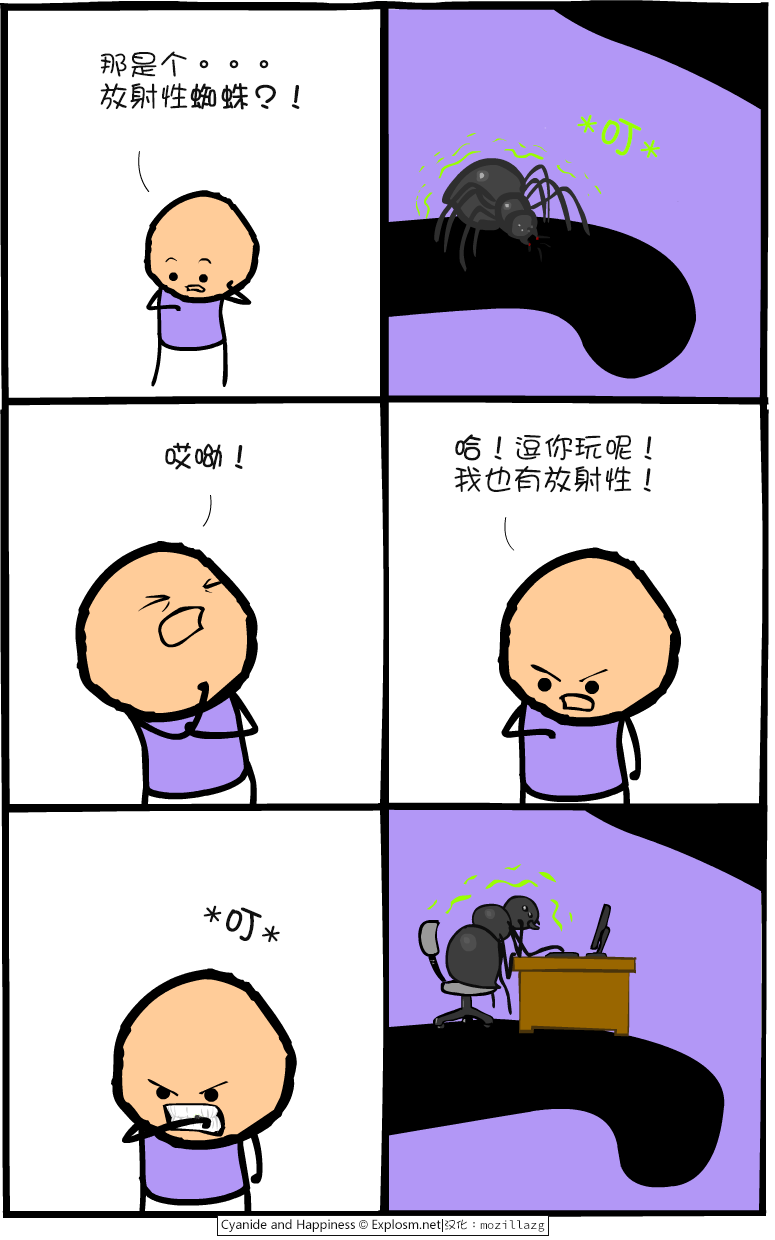
<style>
.page{position:relative;width:775px;height:1240px;background:#ffffff}
.page>*{position:absolute;margin:0}
.t1{font:30px/32px "DFGirl";color:#111111}
.t2{font:30px/32px "DFGirl";color:#111111;font-weight:bold}
.t3{font:44px "DFGirl";color:#99ff00;font-weight:bold}
.t4{font:30px "DFGirl";color:#111111;font-weight:bold}
.t5{font:40px "DFGirl";color:#111111;font-weight:bold}
</style>
<div class="page">
<p class="t1" style="left:100px;top:51px;width:200px;height:59px">那是个。。。<br>放射性<span class="t2">蜘蛛？！</span></p>
<p class="t3" style="left:577px;top:114px;width:83px;height:44px;rotate:22deg">*叮*</p>
<p class="t1" style="left:454px;top:434px;width:198px;height:59px"><span class="t2">哈</span>！逗你玩呢！<br>我也有放射性！</p>
<p class="t4" style="left:165px;top:442px;width:78px;height:28px">哎呦！</p>
<p class="t5" style="left:203px;top:905px;width:77px;height:38px;rotate:19deg">*叮*</p>
</div>
